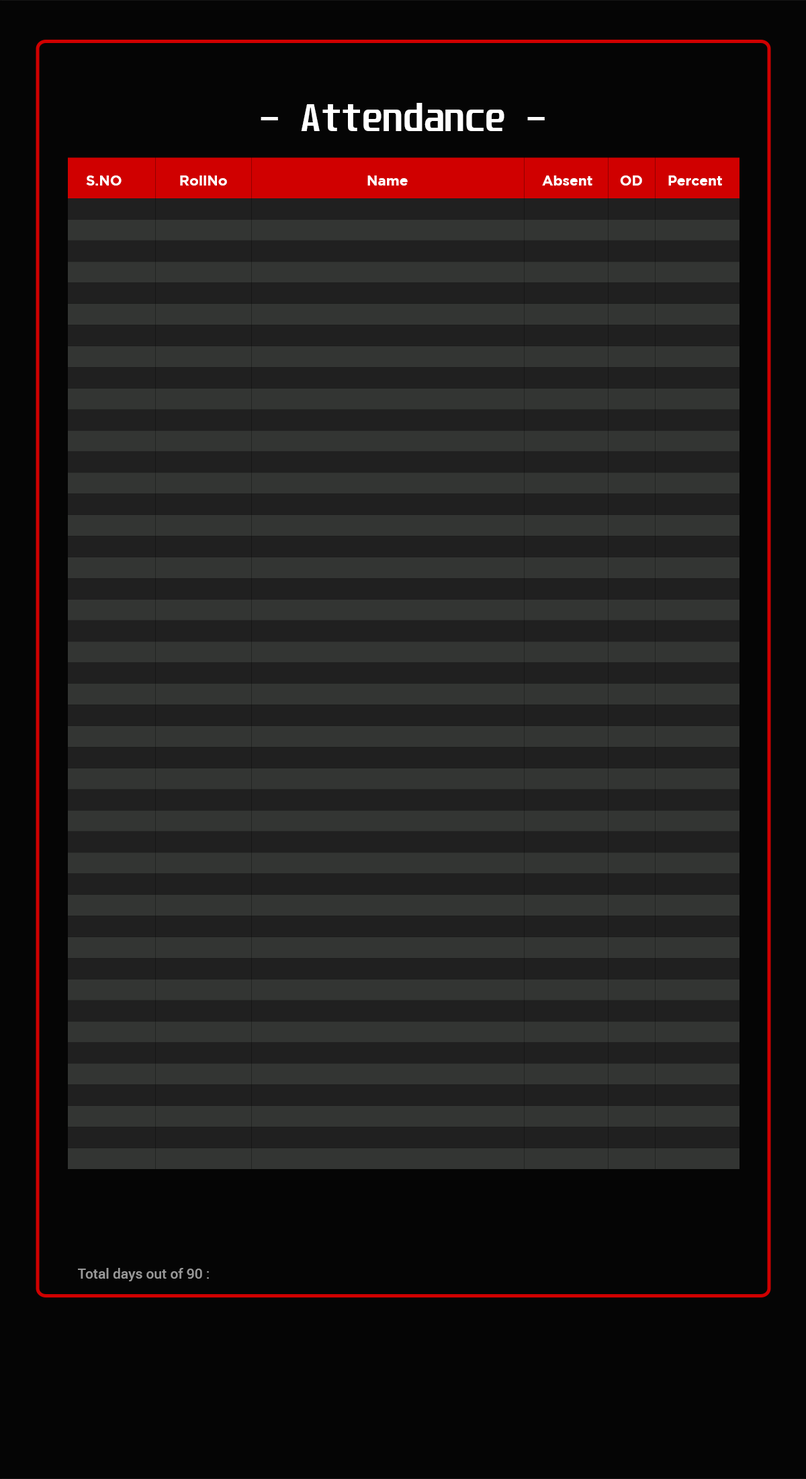
<style>
.page{position:relative;width:806px;height:1479px;background:#050505}
.page>*{position:absolute;margin:0}
.t1{font:33.6px "Unispace-Bold";color:#ffffff}
.t2{font:14px "Gotham-Bold";color:#ffffff}
.t3{font:14px "Roboto-Medium";color:#999999}
</style>
<div class="page">
<p class="t1" style="left:261px;top:103px;width:284px;height:28px">- Attendance -</p>
<p class="t2" style="left:86px;top:175px;width:36px;height:10px">S.NO</p>
<p class="t2" style="left:180px;top:175px;width:47px;height:10px">RollNo</p>
<p class="t2" style="left:368px;top:175px;width:40px;height:10px">Name</p>
<p class="t2" style="left:542px;top:175px;width:51px;height:10px">Absent</p>
<p class="t2" style="left:620px;top:175px;width:22px;height:10px">OD</p>
<p class="t2" style="left:669px;top:175px;width:53px;height:10px">Percent</p>
<p class="t3" style="left:78px;top:1268px;width:131px;height:13px">Total days out of 90 :</p>
</div>
